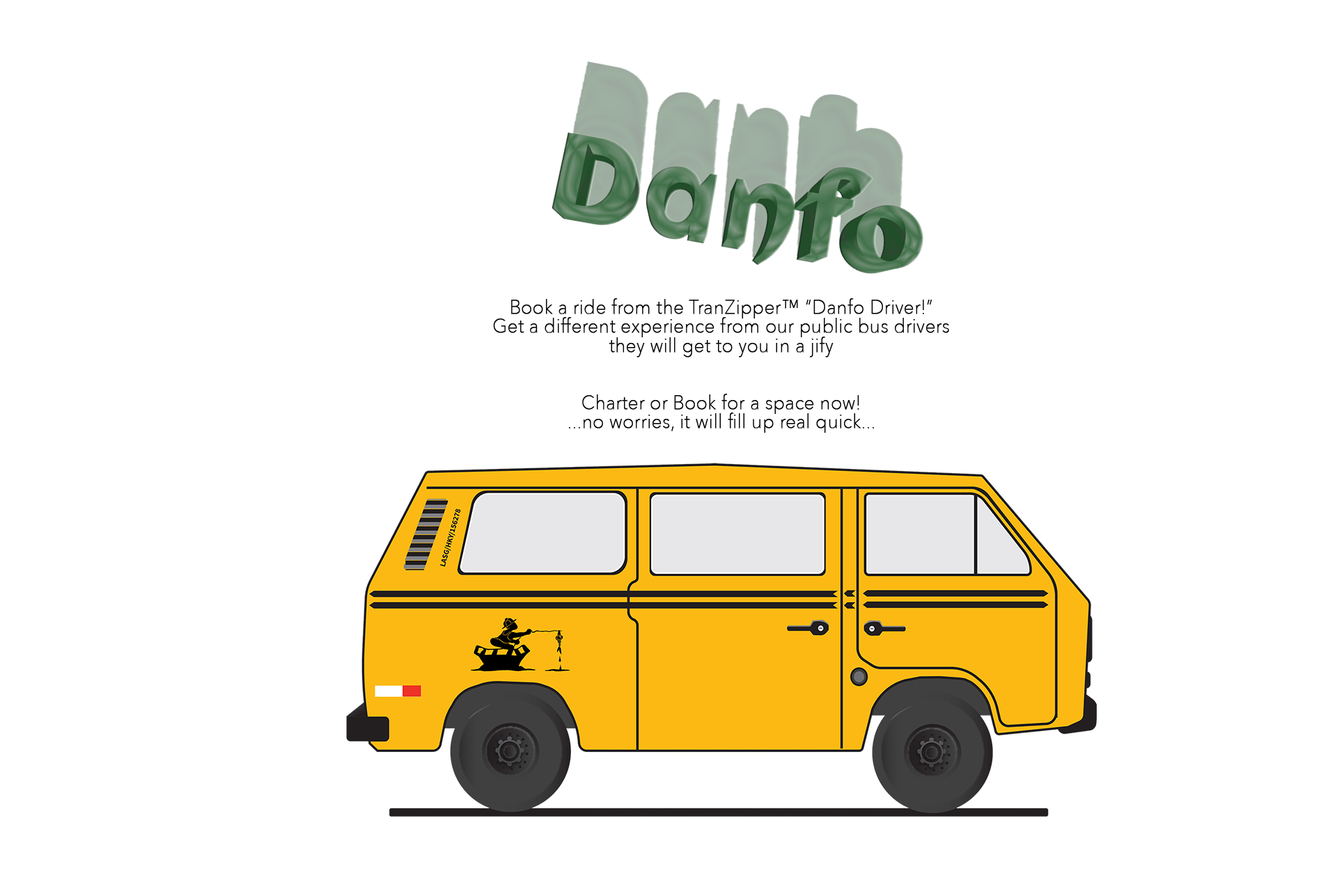
<style>
.page{position:relative;width:1337px;height:892px;background:#ffffff}
.page>*{position:absolute;margin:0}
.t1{font:19.2px/19.1px "AvenirNext-UltraLight";color:#000000;font-weight:bold;scale:0.95 1}
</style>
<div class="page">
<p class="t1" style="left:493px;top:298px;width:456px;height:135px;text-align:center">Book a ride from the TranZipper™ “Danfo Driver!”<br>Get a different experience from our public bus drivers<br>they will get to you in a jify<br><br><br>Charter or Book for a space now!<br>...no worries, it will fill up real quick...</p>
</div>
